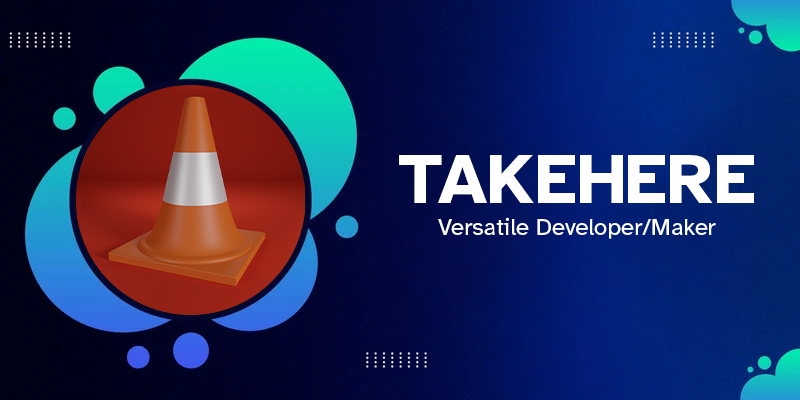
<style>
.page{position:relative;width:800px;height:400px}
.page>*{position:absolute;margin:0}
.t1{font:72px "AtkinsonHyperlegible-Bold";color:#ffffff}
.t2{font:24px "AtkinsonHyperlegible-Regular";color:#ffffff}
</style>
<div class="page">
<p class="t1" style="left:399px;top:155px;width:355px;height:48px">TAKEHERE</p>
<p class="t2" style="left:438px;top:217px;width:278px;height:22px">Versatile Developer/Maker</p>
</div>
